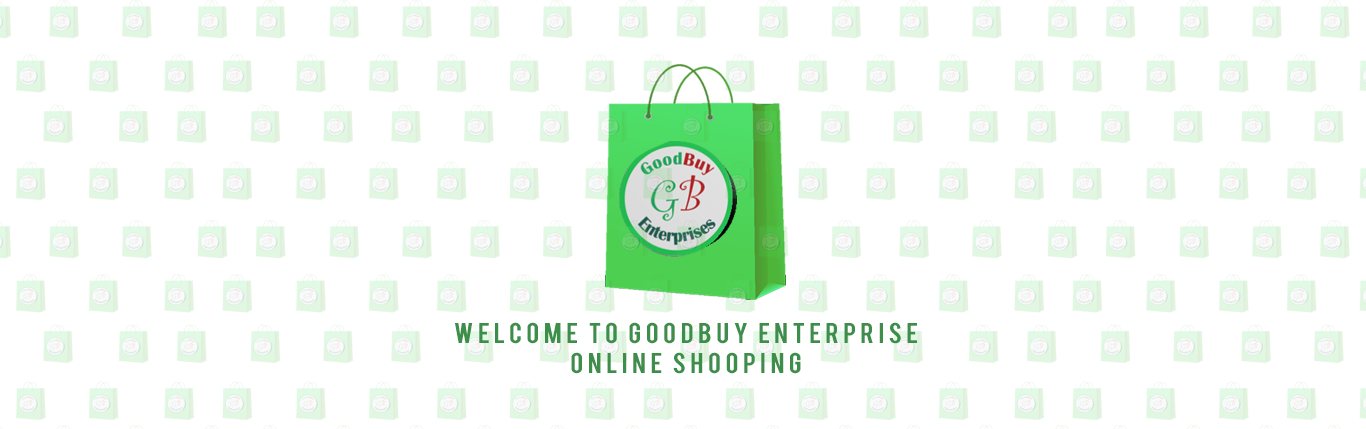
<style>
.page{position:relative;width:1366px;height:429px;background:#ffffff}
.page>*{position:absolute;margin:0}
.t1{font:22.4px "Bebas";letter-spacing:0.16em;color:#3d8e4b;scale:1.11 1}
</style>
<div class="page">
<p class="t1" style="left:455px;top:322px;width:462px;height:52px;text-align:center">WELCOME TO GOODBUY ENTERPRISE<br>ONLINE SHOOPING</p>
</div>
